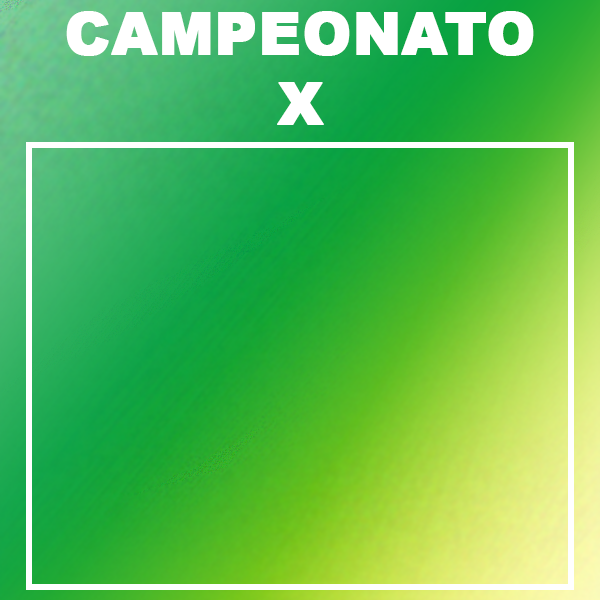
<style>
.page{position:relative;width:600px;height:600px}
.page>*{position:absolute;margin:0}
.t1{font:58.3px "Arial-Black";color:#ffffff;text-transform:uppercase;font-weight:bold}
</style>
<div class="page">
<p class="t1" style="left:66px;top:11px;width:468px;height:114px;text-align:justify">CAMPEONATO<br>x</p>
</div>
